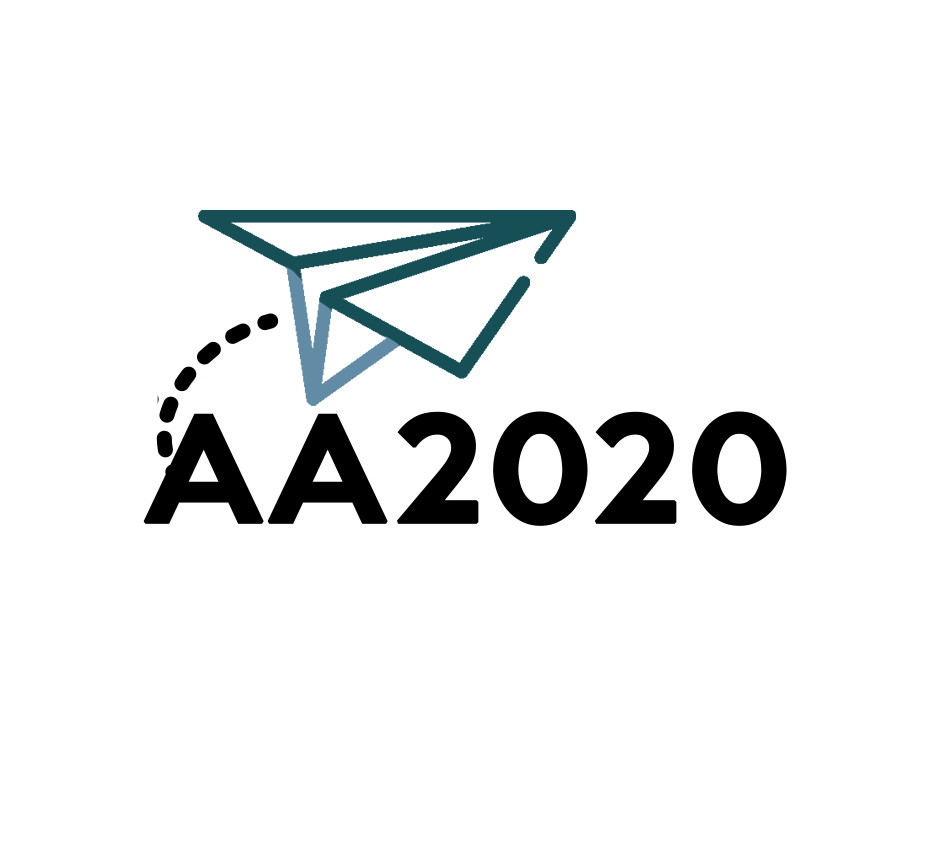
<style>
.page{position:relative;width:940px;height:862px;background:#ffffff}
.page>*{position:absolute;margin:0}
.t1{font:133.3px "KeepCalm-Medium";letter-spacing:0.02em;color:#000000;font-weight:bold}
</style>
<div class="page">
<p class="t1" style="left:143px;top:411px;width:644px;height:115px">AA2020</p>
</div>
